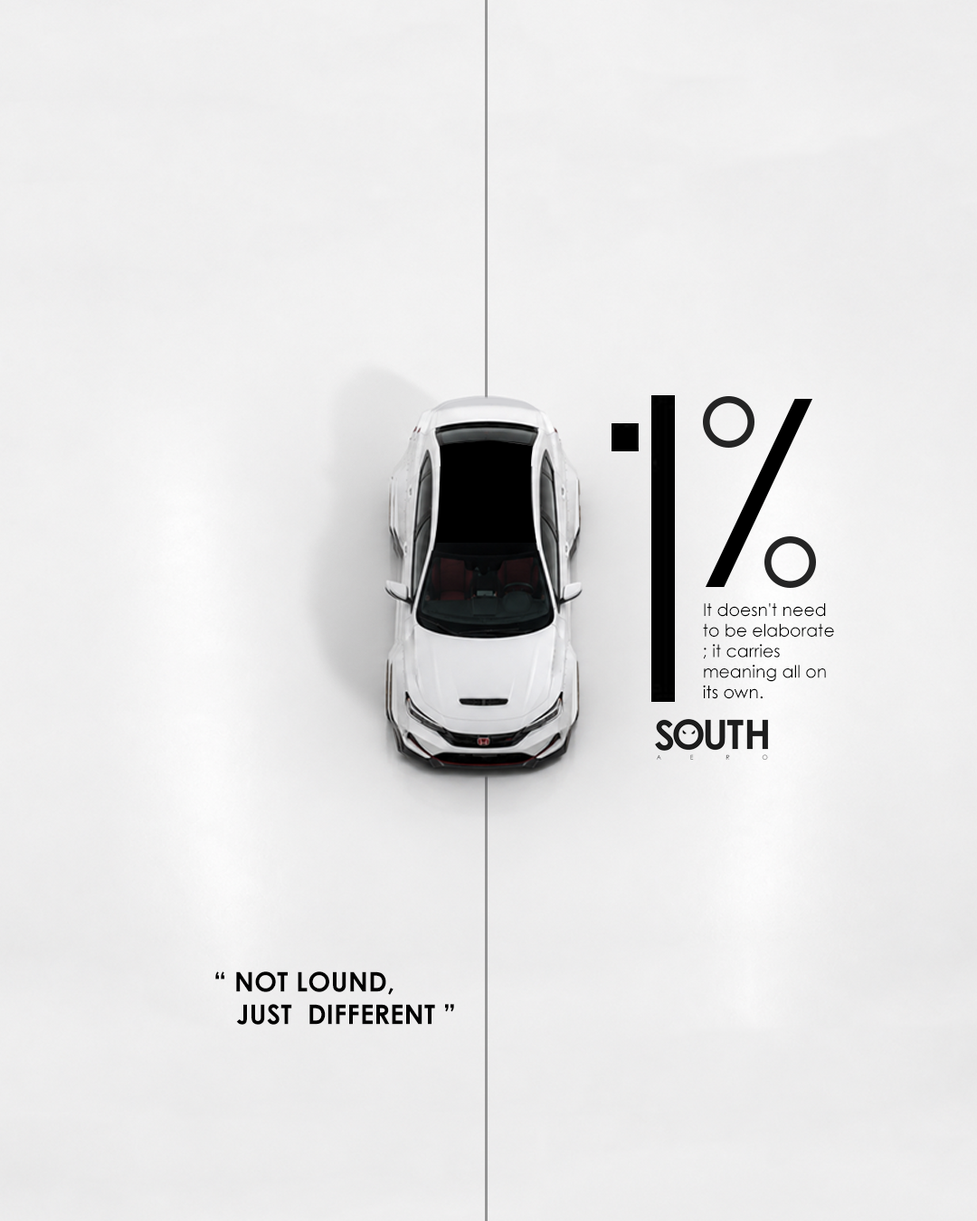
<style>
.page{position:relative;width:977px;height:1221px}
.page>*{position:absolute;margin:0}
.t1{font:17.1px "CenturyGothic";color:#000000}
.t2{font:27.1px "CenturyGothic-Bold";color:#000000}
</style>
<div class="page">
<p class="t1" style="left:703px;top:603px;width:131px;height:96px">It doesn't need<br>to be elaborate<br>; it carries <br>meaning all on <br>its own.</p>
<p class="t2" style="left:215px;top:971px;width:239px;height:54px">“ NOT LOUND,<br>   JUST  DIFFERENT ”</p>
</div>
